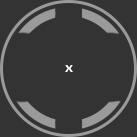
<style>
.page{position:relative;width:137px;height:137px;background:#333333}
.page>*{position:absolute;margin:0}
.t1{font:9.9px "BebasNeue";color:#ffffff;scale:2.01 1}
</style>
<div class="page">
<p class="t1" style="left:65px;top:65px;width:8px;height:7px">X</p>
</div>
